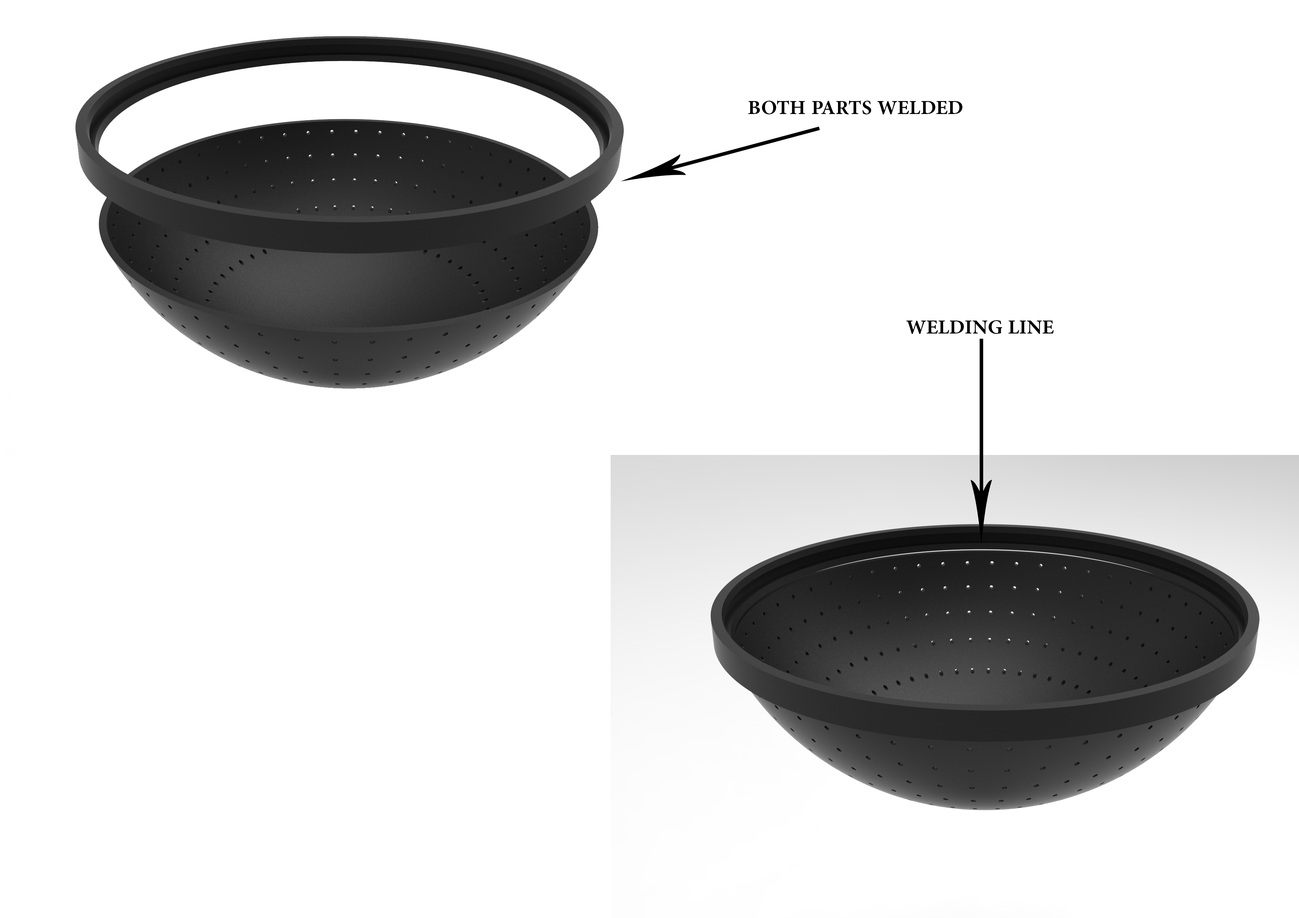
<style>
.page{position:relative;width:1299px;height:918px;background:#ffffff}
.page>*{position:absolute;margin:0}
.t1{font:27.8px "AdobeArabic-Bold";color:#000000}
</style>
<div class="page">
<p class="t1" style="left:748px;top:100px;width:214px;height:14px">BOTH PARTS WELDED</p>
<p class="t1" style="left:906px;top:320px;width:148px;height:14px">WELDING LINE</p>
</div>
